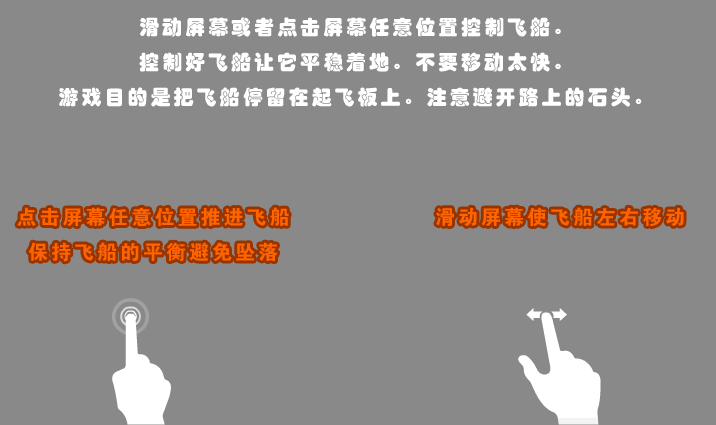
<style>
.page{position:relative;width:716px;height:425px;background:#898989}
.page>*{position:absolute;margin:0}
.t1{font:20px "STHupo";letter-spacing:0.15em;color:#ffffff}
.t2{font:20px "Jdahei";letter-spacing:0.15em;color:#ff6400}
</style>
<div class="page">
<p class="t1" style="left:59px;top:17px;width:583px;height:90px;text-align:center">滑动屏幕或者点击屏幕任意位置控制飞船。<br>控制好飞船让它平稳着地。不要移动太快。<br>游戏目的是把飞船停留在起飞板上。注意避开路上的石头。</p>
<p class="t2" style="left:17px;top:207px;width:272px;height:55px;text-align:center">点击屏幕任意位置推进飞船<br>保持飞船的平衡避免坠落</p>
<p class="t2" style="left:436px;top:207px;width:248px;height:20px">滑动屏幕使飞船左右移动</p>
</div>
